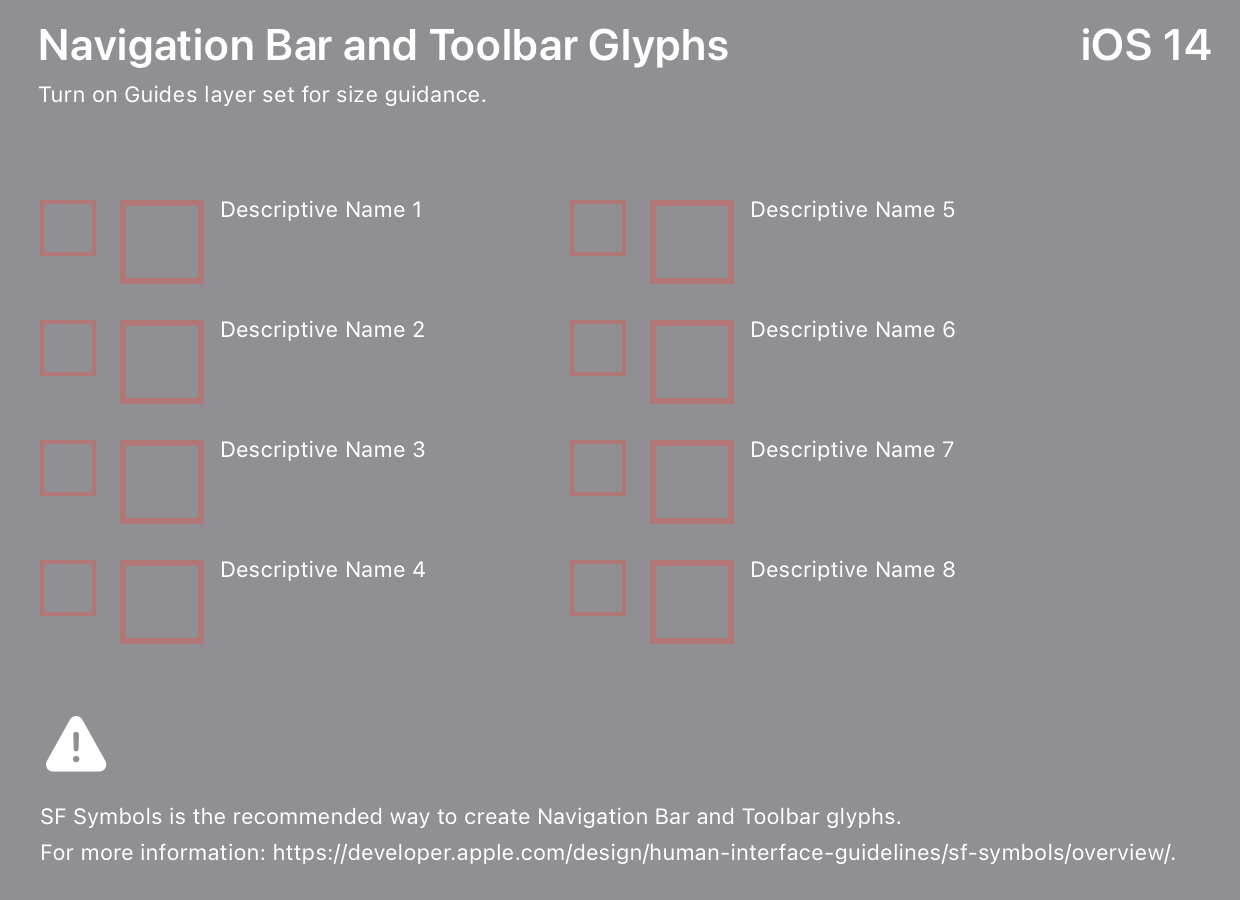
<style>
.page{position:relative;width:1240px;height:900px;background:#8f8f94}
.page>*{position:absolute;margin:0}
.t1{font:44px "SFProDisplay-Semibold";letter-spacing:0.016em;color:#ffffff}
.t2{font:22px "SFProText-Regular";letter-spacing:0.006em;color:#ffffff}
.t3{font:22px/120px "SFProText-Regular";letter-spacing:0.006em;color:#ffffff}
.t4{font:22px/36px "SFProText-Regular";letter-spacing:0.006em;color:#ffffff}
</style>
<div class="page">
<p class="t1" style="left:40px;top:28px;width:688px;height:40px">Navigation Bar and Toolbar Glyphs</p>
<p class="t1" style="left:1083px;top:28px;width:128px;height:33px">iOS 14</p>
<p class="t2" style="left:39px;top:85px;width:447px;height:21px">Turn on Guides layer set for size guidance.</p>
<p class="t3" style="left:222px;top:200px;width:203px;height:381px">Descriptive Name 1<br>Descriptive Name 2<br>Descriptive Name 3<br>Descriptive Name 4</p>
<p class="t3" style="left:752px;top:200px;width:203px;height:381px">Descriptive Name 5<br>Descriptive Name 6<br>Descriptive Name 7<br>Descriptive Name 8</p>
<p class="t4" style="left:41px;top:807px;width:1134px;height:58px">SF Symbols is the recommended way to create Navigation Bar and Toolbar glyphs.<br>For more information: https://developer.apple.com/design/human-interface-guidelines/sf-symbols/overview/.</p>
</div>
